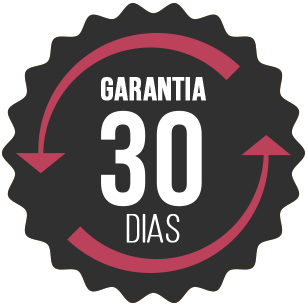
<style>
.page{position:relative;width:307px;height:307px;background:#303030}
.page>*{position:absolute;margin:0}
.t1{font:32.9px "BebasNeueBold";color:#ffffff;text-transform:uppercase;font-weight:bold}
.t2{font:132.5px "BebasNeueBold";color:#ffffff;text-transform:uppercase;font-weight:bold}
.t3{font:39.7px "BebasNeueLight";color:#ffffff;text-transform:uppercase;font-weight:bold}
</style>
<div class="page">
<p class="t1" style="left:101px;top:77px;width:105px;height:24px">Garantia</p>
<p class="t2" style="left:101px;top:110px;width:101px;height:97px">30</p>
<p class="t3" style="left:126px;top:214px;width:54px;height:29px">dias</p>
</div>
